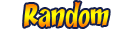
<style>
.page{position:relative;width:130px;height:33px;background:#ffffff}
.page>*{position:absolute;margin:0}
.t1{font:28px "Yikes"}
</style>
<div class="page">
<p class="t1" style="left:24px;top:2px;width:85px;height:25px">Random</p>
</div>
